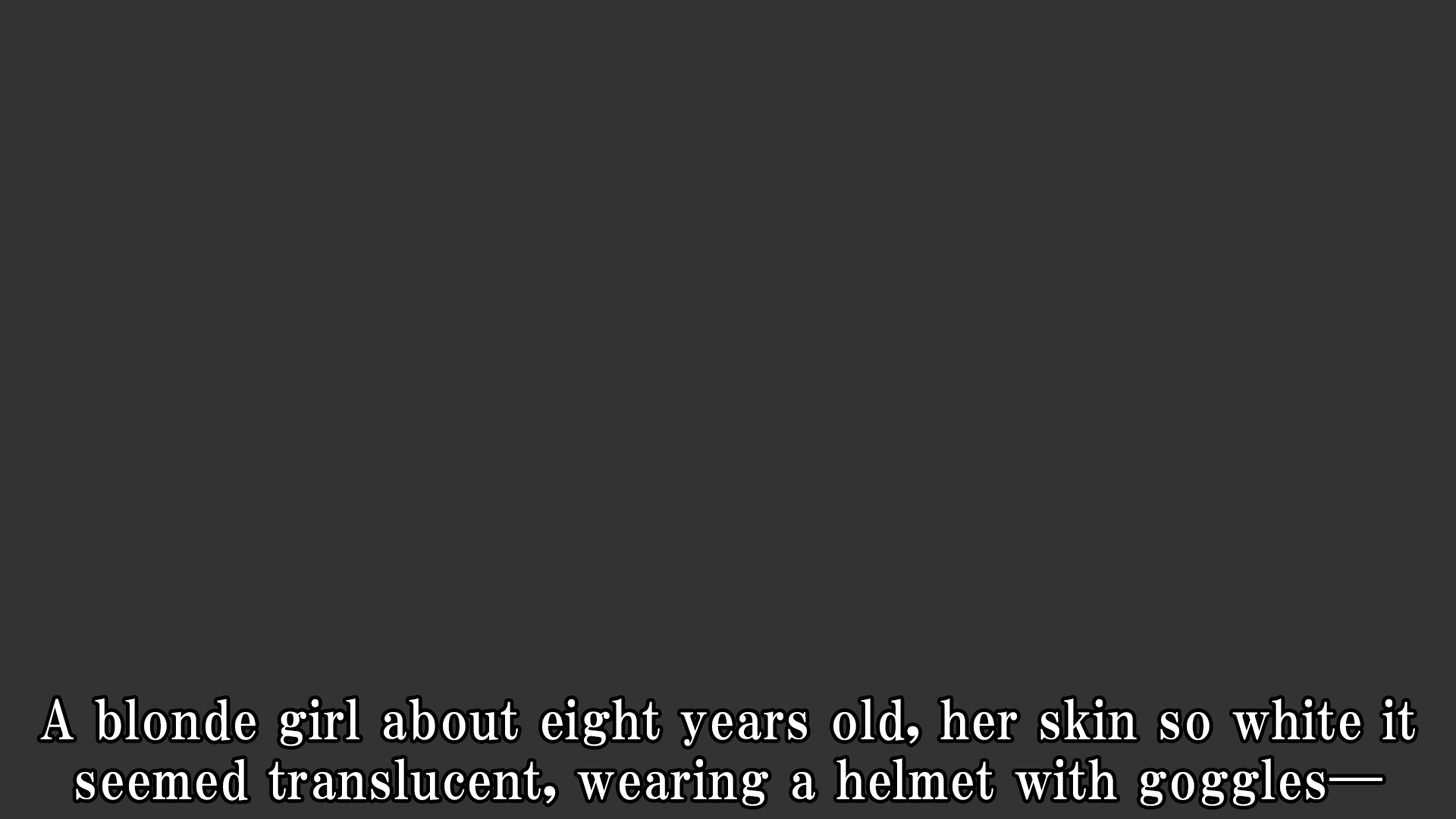
<style>
.page{position:relative;width:1456px;height:819px;background:#333333}
.page>*{position:absolute;margin:0}
.t1{font:53.1px/59.9px "HGPMinchoE";letter-spacing:0.025em;color:#ffffff}
</style>
<div class="page">
<p class="t1" style="left:40px;top:698px;width:1375px;height:108px;text-align:center">A blonde girl about eight years old, her skin so white it<br>seemed translucent, wearing a helmet with goggles—</p>
</div>
